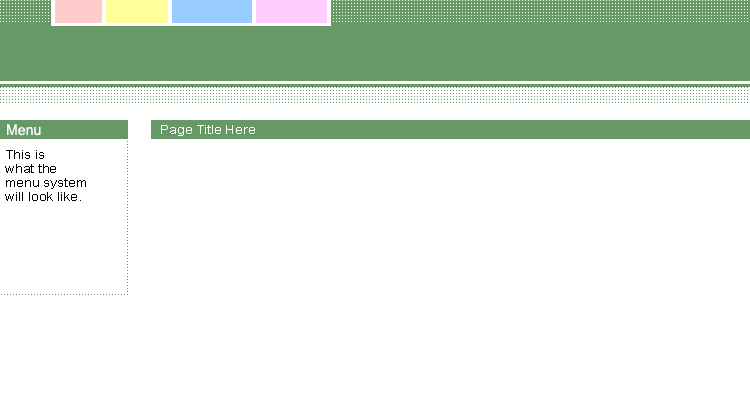
<style>
.page{position:relative;width:750px;height:400px;background:#ffffff}
.page>*{position:absolute;margin:0}
.t1{font:15px "ArialNarrow";color:#ffffff;scale:1.15 1}
.t2{font:12px "ArialMT";color:#ffffff;scale:1.15 1}
.t3{font:12px/14px "ArialMT";color:#000000;scale:1.15 1}
</style>
<div class="page">
<p class="t1" style="left:7px;top:124px;width:34px;height:12px">Menu</p>
<p class="t2" style="left:161px;top:125px;width:94px;height:11px">Page Title Here</p>
<p class="t3" style="left:5px;top:150px;width:81px;height:51px">This is <br>what the <br>menu system<br>will look like.</p>
</div>
